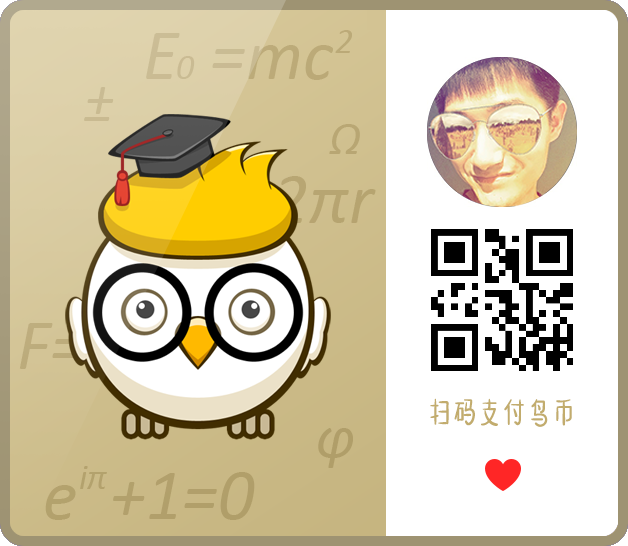
<style>
.page{position:relative;width:628px;height:546px;background:#ffffff}
.page>*{position:absolute;margin:0}
.t1{font:30px "HYMiaoHunTiW";color:#c2ac6d;font-weight:bold}
</style>
<div class="page">
<p class="t1" style="left:430px;top:398px;width:142px;height:29px">扫码支付鸟币</p>
<p class="t1" style="left:430px;top:398px;width:142px;height:29px">扫码支付鸟币</p>
<p class="t1" style="left:430px;top:398px;width:142px;height:29px">扫码支付鸟币</p>
<p class="t1" style="left:430px;top:398px;width:142px;height:29px">扫码支付鸟币</p>
<p class="t1" style="left:430px;top:398px;width:142px;height:29px">扫码支付鸟币</p>
<p class="t1" style="left:430px;top:398px;width:142px;height:29px">扫码支付鸟币</p>
<p class="t1" style="left:430px;top:398px;width:142px;height:29px">扫码支付鸟币</p>
</div>
